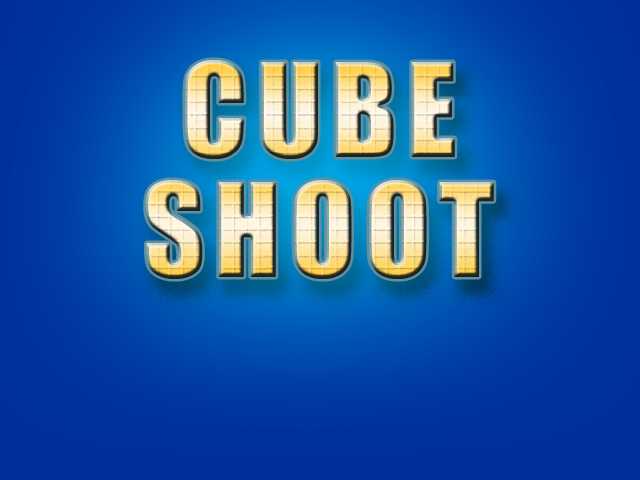
<style>
.page{position:relative;width:640px;height:480px}
.page>*{position:absolute;margin:0}
.t1{font:120px/120px "Impact";letter-spacing:0.075em}
</style>
<div class="page">
<p class="t1" style="left:145px;top:60px;width:349px;height:219px;text-align:center">CUBE<br>SHOOT</p>
</div>
